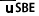
<style>
.page{position:relative;width:39px;height:16px;background:#ffffff}
.page>*{position:absolute;margin:0}
.t1{font:12px "AdobeGothicStd-Bold";letter-spacing:-0.025em;color:#000000}
</style>
<div class="page">
<p class="t1" style="left:15px;top:2px;width:20px;height:11px">SBE</p>
</div>
